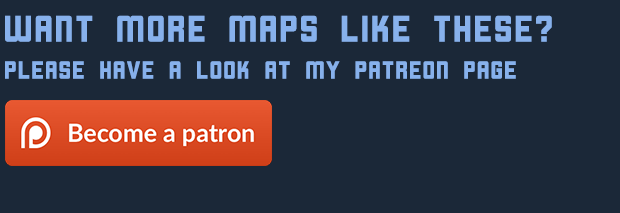
<style>
.page{position:relative;width:620px;height:213px;background:#1b2838}
.page>*{position:absolute;margin:0}
.t1{font:36px "Cornerstone";letter-spacing:-0.01em;color:#87b1ec}
.t2{font:24px "Cornerstone";letter-spacing:-0.01em;color:#87b1ec}
</style>
<div class="page">
<p class="t1" style="left:5px;top:15px;width:547px;height:27px">Want more maps like these?</p>
<p class="t2" style="left:5px;top:61px;width:511px;height:18px">Please have a look at my patreon page</p>
</div>
